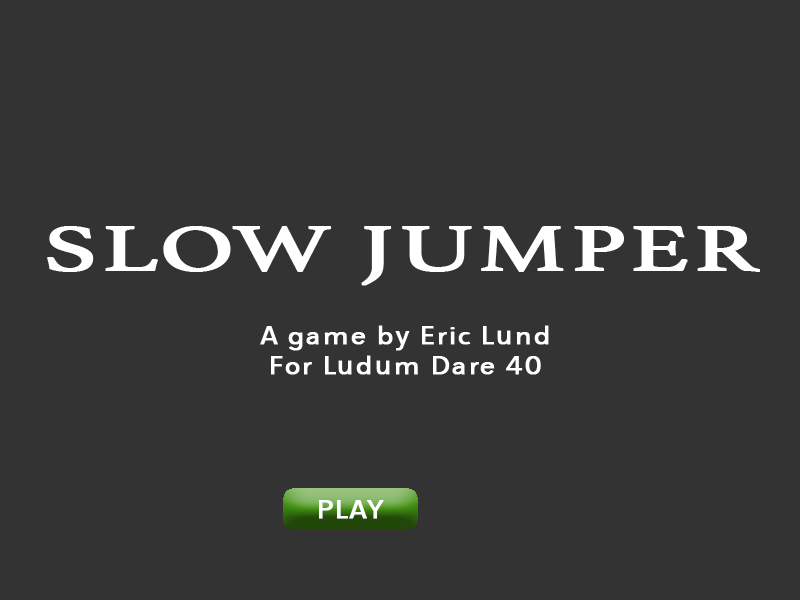
<style>
.page{position:relative;width:800px;height:600px;background:#333333}
.page>*{position:absolute;margin:0}
.t1{font:66.7px "Athelas-Regular";letter-spacing:0.02em;color:#ffffff;font-weight:bold;scale:1.47 1}
.t2{font:25px "AvenirNextCondensed-Regular";letter-spacing:0.02em;color:#ffffff;font-weight:bold;scale:1.47 1}
</style>
<div class="page">
<p class="t1" style="left:47px;top:226px;width:713px;height:60px">SLOW JUMPER</p>
<p class="t2" style="left:260px;top:325px;width:289px;height:50px;text-align:center">A game by Eric Lund<br>For Ludum Dare 40</p>
<p class="t2" style="left:319px;top:500px;width:65px;height:19px">PLAY</p>
</div>
